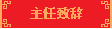
<style>
.page{position:relative;width:112px;height:29px;background:#ed1b24}
.page>*{position:absolute;margin:0}
.t1{font:14px "SimHei";letter-spacing:-0.075em;color:#ffa65f;font-weight:bold}
</style>
<div class="page">
<p class="t1" style="left:30px;top:7px;width:53px;height:12px">主任致辞</p>
</div>
